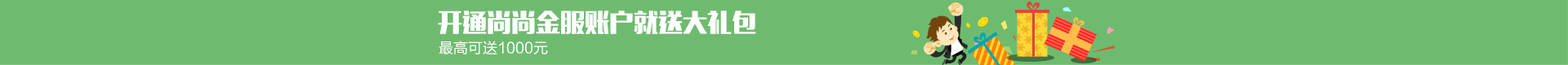
<style>
.page{position:relative;width:1568px;height:65px;background:#6ebb6f}
.page>*{position:absolute;margin:0}
.t1{font:24.5px "MFLiHei_Noncommercial-Regular";color:#ffffff}
.t2{font:14.7px "ZpixEX2";color:#ffffff}
</style>
<div class="page">
<p class="t1" style="left:438px;top:11px;width:318px;height:23px">开通尚尚金服账户就送大礼包</p>
<p class="t2" style="left:439px;top:41px;width:109px;height:14px">最高可送1000元</p>
</div>
